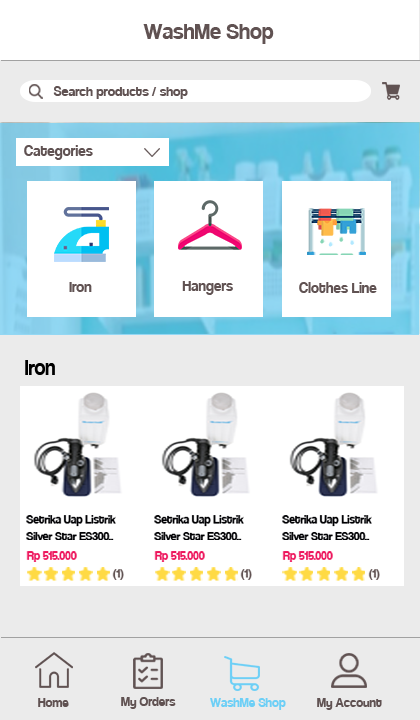
<style>
.page{position:relative;width:420px;height:720px;background:#ffffff}
.page>*{position:absolute;margin:0}
.t1{font:24px "Coolvetica-Regular";color:#605252}
.t2{font:14.7px "Coolvetica-Regular";color:#605252}
.t3{font:17.1px "Coolvetica-Regular";color:#605252;scale:0.95 1}
.t4{font:24px "Coolvetica-Regular";color:#000000;scale:0.92 1}
.t5{font:13.6px "Coolvetica-Regular";color:#000003;scale:0.93 1}
.t6{font:13.6px "Coolvetica-Regular";color:#ed145b;scale:0.93 1}
.t7{font:13.6px "Coolvetica-Regular";color:#605252}
.t8{font:14px "Coolvetica-Regular";color:#605252}
.t9{font:14px "Coolvetica-Regular";color:#6dcff6}
</style>
<div class="page">
<p class="t1" style="left:143px;top:24px;width:131px;height:20px">WashMe Shop</p>
<p class="t2" style="left:53px;top:86px;width:135px;height:13px">Search products / shop</p>
<p class="t3" style="left:24px;top:145px;width:69px;height:15px">Categories</p>
<p class="t3" style="left:182px;top:281px;width:51px;height:14px">Hangers</p>
<p class="t3" style="left:69px;top:282px;width:23px;height:10px">Iron</p>
<p class="t3" style="left:299px;top:282px;width:78px;height:11px">Clothes Line</p>
<p class="t4" style="left:25px;top:360px;width:30px;height:15px">Iron</p>
<p class="t5" style="left:26px;top:515px;width:90px;height:25px">Setrika Uap Listrik<br>Silver Star ES300..</p>
<p class="t5" style="left:154px;top:515px;width:90px;height:25px">Setrika Uap Listrik<br>Silver Star ES300..</p>
<p class="t5" style="left:282px;top:515px;width:90px;height:25px">Setrika Uap Listrik<br>Silver Star ES300..</p>
<p class="t6" style="left:26px;top:551px;width:51px;height:11px">Rp 515.000</p>
<p class="t6" style="left:154px;top:551px;width:51px;height:11px">Rp 515.000</p>
<p class="t6" style="left:282px;top:551px;width:51px;height:11px">Rp 515.000</p>
<p class="t7" style="left:112px;top:569px;width:12px;height:11px">(1)</p>
<p class="t7" style="left:240px;top:569px;width:12px;height:11px">(1)</p>
<p class="t7" style="left:368px;top:569px;width:12px;height:11px">(1)</p>
<p class="t8" style="left:38px;top:698px;width:31px;height:9px">Home</p>
<p class="t8" style="left:121px;top:697px;width:55px;height:12px">My Orders</p>
<p class="t9" style="left:210px;top:698px;width:76px;height:12px">WashMe Shop</p>
<p class="t8" style="left:317px;top:698px;width:65px;height:12px">My Account</p>
</div>
